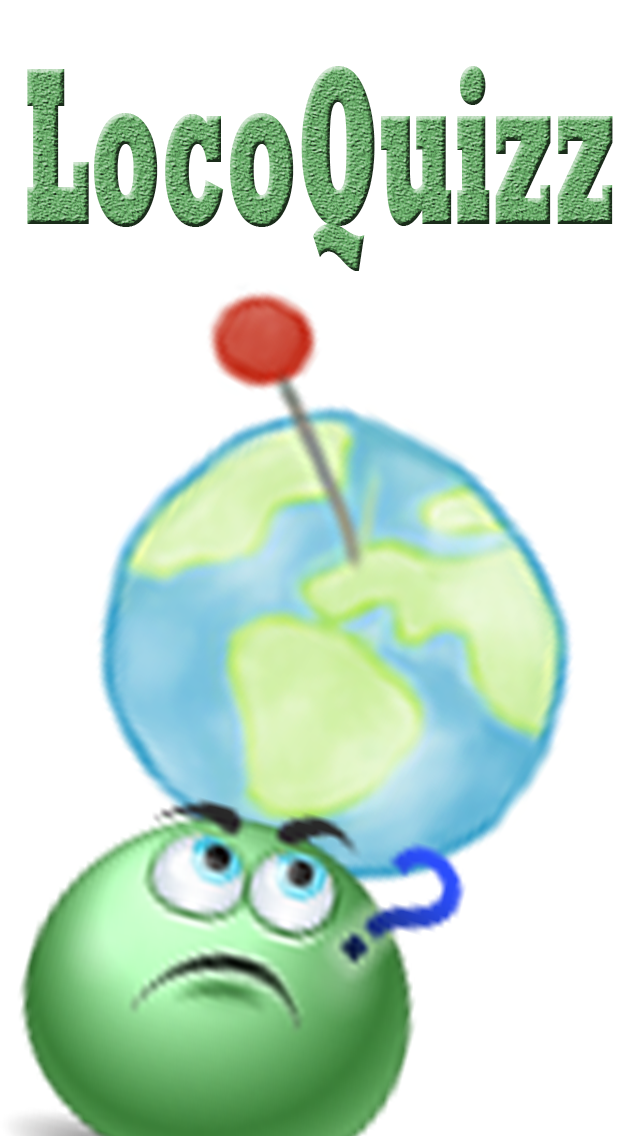
<style>
.page{position:relative;width:640px;height:1136px;background:#ffffff}
.page>*{position:absolute;margin:0}
.t1{font:228px "Rockwell-ExtraBold";scale:0.41 1}
</style>
<div class="page">
<p class="t1" style="left:27px;top:66px;width:586px;height:205px">LocoQuizz</p>
</div>
